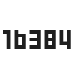
<style>
.page{position:relative;width:74px;height:74px;background:#ffffff}
.page>*{position:absolute;margin:0}
.t1{font:30px "04b24";color:#1f1f1f}
</style>
<div class="page">
<p class="t1" style="left:3px;top:30px;width:68px;height:19px">16384</p>
</div>
